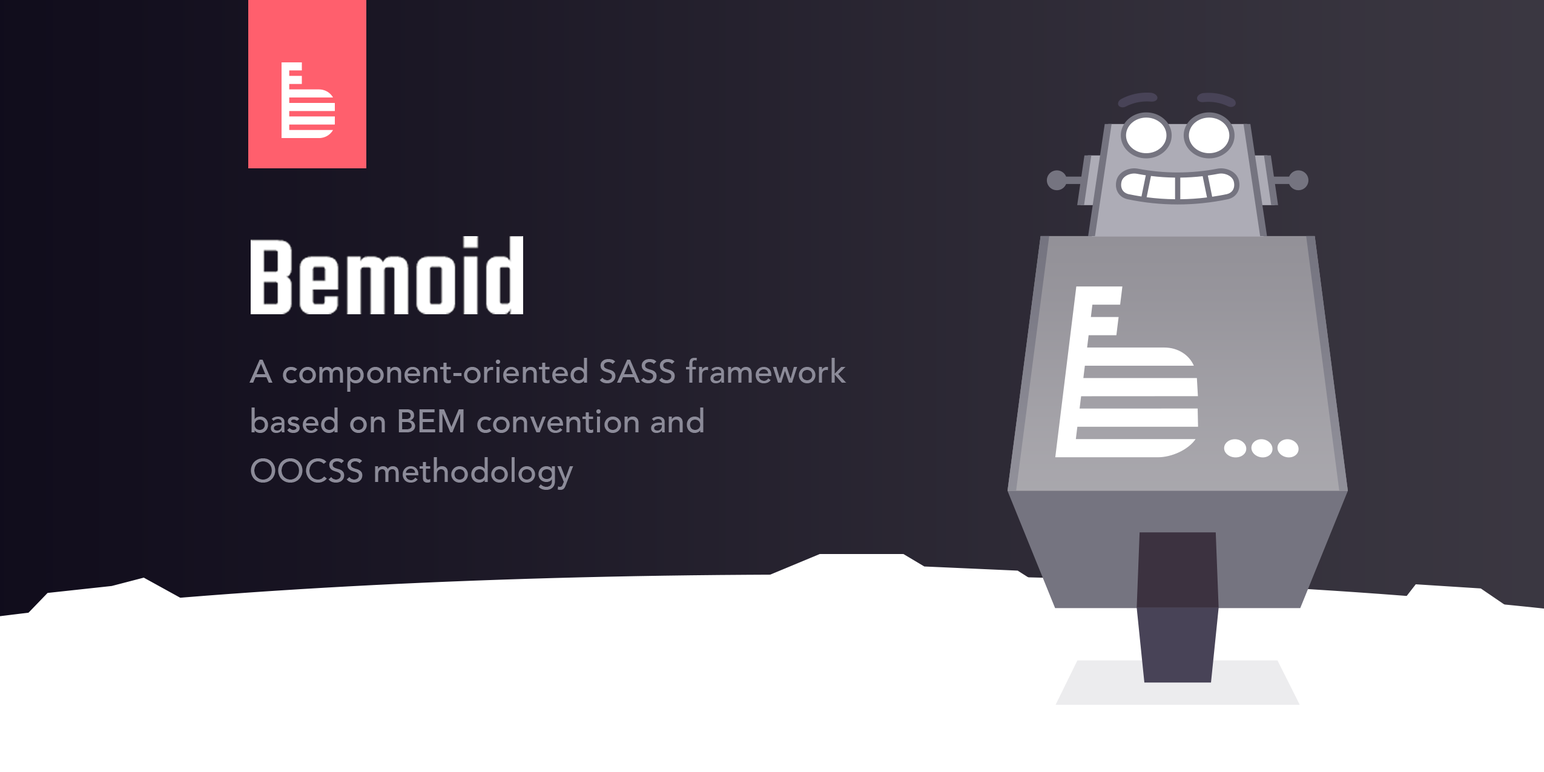
<style>
.page{position:relative;width:1544px;height:772px;background:#ffffff}
.page>*{position:absolute;margin:0}
.t1{font:116.8px "Teko-Medium";color:#ffffff}
.t2{font:33px/49.5px "Avenir-Medium";color:#8c8b99}
</style>
<div class="page">
<p class="t1" style="left:251px;top:236px;width:272px;height:78px">Bemoid</p>
<p class="t2" style="left:250px;top:358px;width:597px;height:132px">A component-oriented SASS framework <br>based on BEM convention and <br>OOCSS methodology</p>
</div>
